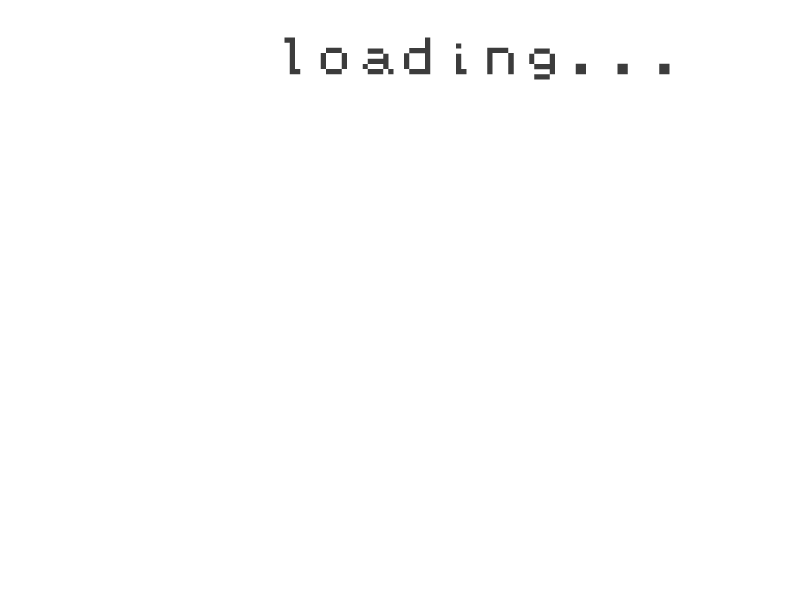
<style>
.page{position:relative;width:800px;height:600px;background:#ffffff}
.page>*{position:absolute;margin:0}
.t1{font:41.7px "WisdomoftheWorld";color:#3c3c3c}
</style>
<div class="page">
<p class="t1" style="left:284px;top:37px;width:386px;height:43px">loading...</p>
</div>
